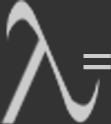
<style>
.page{position:relative;width:111px;height:124px;background:#333333}
.page>*{position:absolute;margin:0}
.t1{font:72px "RunicMT-Condensed";color:#cccccc}
</style>
<div class="page">
<p class="t1" style="left:83px;top:54px;width:28px;height:16px">=</p>
</div>
